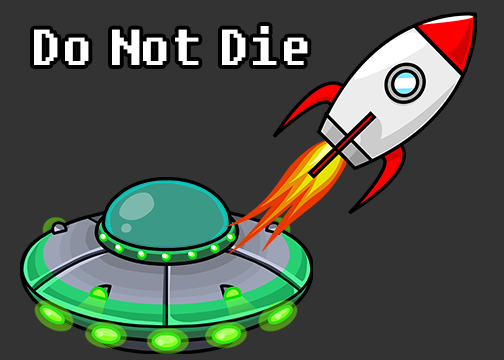
<style>
.page{position:relative;width:504px;height:360px;background:#333333}
.page>*{position:absolute;margin:0}
.t1{font:50px "Fixedsys";color:#ffffff}
</style>
<div class="page">
<p class="t1" style="left:34px;top:26px;width:274px;height:39px">Do Not Die</p>
</div>
